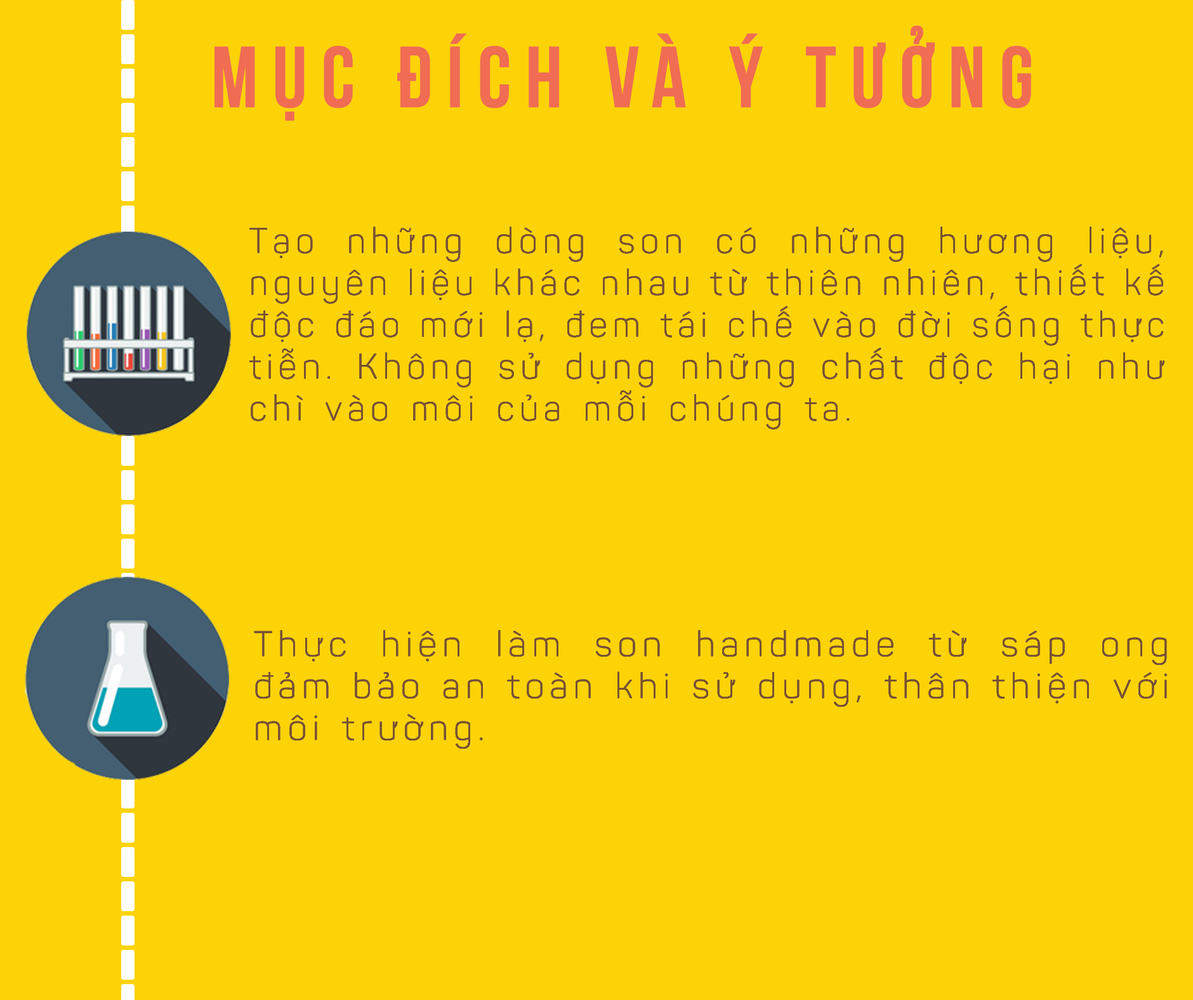
<style>
.page{position:relative;width:1193px;height:1000px;background:#fcd307}
.page>*{position:absolute;margin:0}
.t1{font:86.5px "UTM-Bebas";letter-spacing:0.14em;color:#f06c53;font-weight:bold}
.t2{font:34.9px "iCielPanton-Light";letter-spacing:0.14em;color:#785134;font-weight:bold;scale:0.97 1}
.t3{font:34.9px "iCielPanton-Light";letter-spacing:0.14em;color:#785134;font-weight:bold}
</style>
<div class="page">
<p class="t1" style="left:214px;top:25px;width:817px;height:96px">MỤC ĐÍCH và Ý TƯỞNG</p>
<p class="t2" style="left:249px;top:226px;width:915px;height:203px;text-align:justify">Tạo những dòng son có những hương liệu, nguyên liệu khác nhau từ thiên nhiên, thiết kế độc đáo mới lạ, đem tái chế vào đời sống thực tiễn. Không sử dụng những chất độc hại như chì vào môi của mỗi chúng ta.</p>
<p class="t2" style="left:249px;top:226px;width:915px;height:203px;text-align:justify">Tạo những dòng son có những hương liệu, nguyên liệu khác nhau từ thiên nhiên, thiết kế độc đáo mới lạ, đem tái chế vào đời sống thực tiễn. Không sử dụng những chất độc hại như chì vào môi của mỗi chúng ta.</p>
<p class="t2" style="left:249px;top:226px;width:915px;height:203px;text-align:justify">Tạo những dòng son có những hương liệu, nguyên liệu khác nhau từ thiên nhiên, thiết kế độc đáo mới lạ, đem tái chế vào đời sống thực tiễn. Không sử dụng những chất độc hại như chì vào môi của mỗi chúng ta.</p>
<p class="t2" style="left:249px;top:226px;width:915px;height:203px;text-align:justify">Tạo những dòng son có những hương liệu, nguyên liệu khác nhau từ thiên nhiên, thiết kế độc đáo mới lạ, đem tái chế vào đời sống thực tiễn. Không sử dụng những chất độc hại như chì vào môi của mỗi chúng ta.</p>
<p class="t3" style="left:254px;top:630px;width:913px;height:119px;text-align:justify">Thực hiện làm son handmade từ sáp ong  đảm bảo an toàn khi sử dụng, thân thiện với môi trường.</p>
<p class="t3" style="left:254px;top:630px;width:913px;height:119px;text-align:justify">Thực hiện làm son handmade từ sáp ong  đảm bảo an toàn khi sử dụng, thân thiện với môi trường.</p>
<p class="t3" style="left:254px;top:630px;width:913px;height:119px;text-align:justify">Thực hiện làm son handmade từ sáp ong  đảm bảo an toàn khi sử dụng, thân thiện với môi trường.</p>
<p class="t3" style="left:254px;top:630px;width:913px;height:119px;text-align:justify">Thực hiện làm son handmade từ sáp ong  đảm bảo an toàn khi sử dụng, thân thiện với môi trường.</p>
</div>
